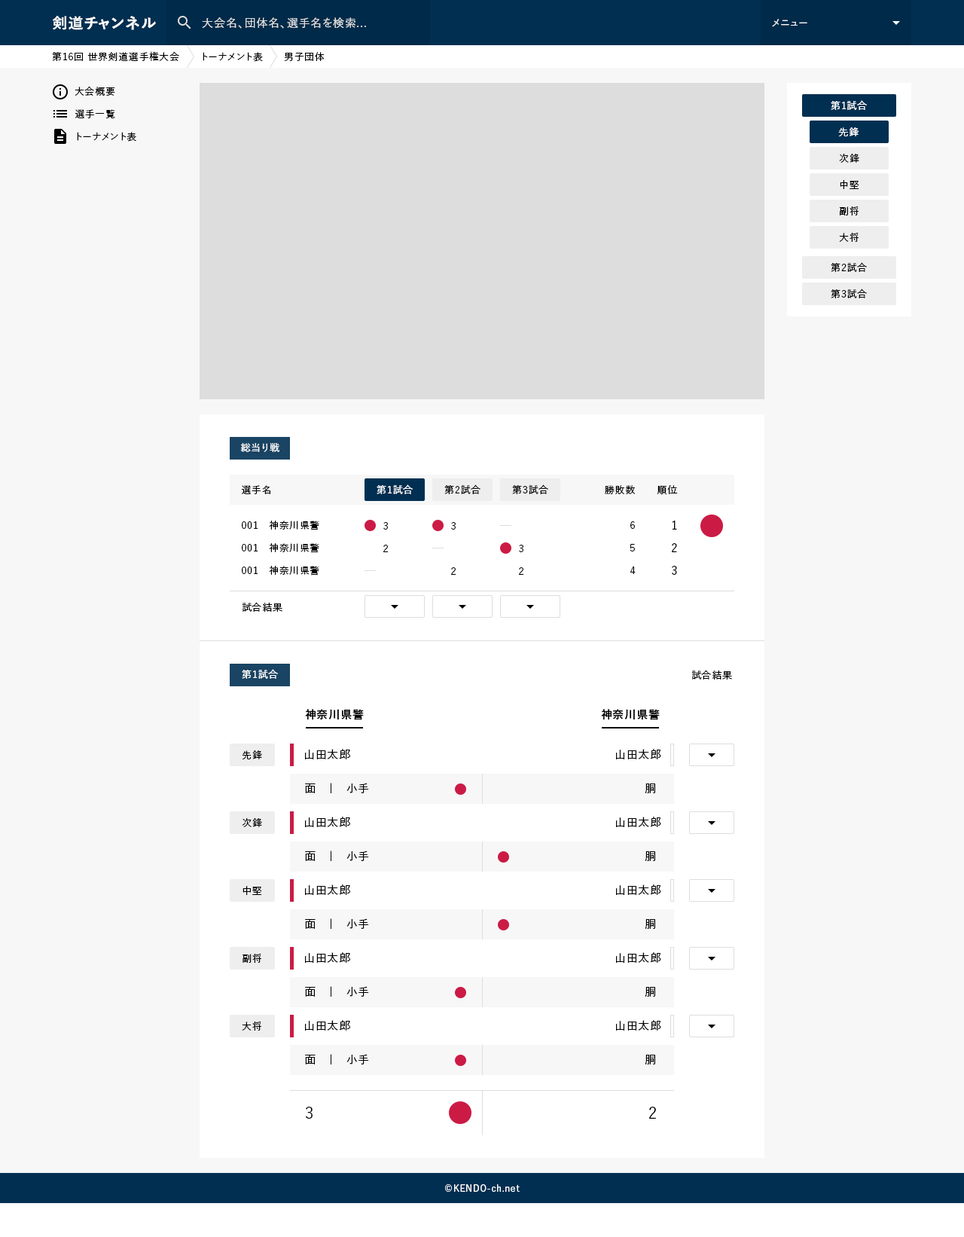
<style>
.page{position:relative;width:964px;height:1237px;background:#f7f7f7}
.page>*{position:absolute;margin:0}
.t1{font:15.1px "YuGo-Bold";letter-spacing:0.05em;color:#ffffff}
.t2{font:11.3px "YuGo-Medium";letter-spacing:0.05em;color:#dddddd}
.t3{font:9.8px "YuGo-Medium";letter-spacing:0.05em;color:#ffffff}
.t4{font:9.8px "YuGo-Medium";letter-spacing:0.05em;color:#000000}
.t5{font:9.8px/22.6px "YuGo-Medium";letter-spacing:0.05em;color:#000000}
.t6{font:9.8px/26.4px "YuGo-Medium";letter-spacing:0.05em;color:#000000}
.t7{font:11.3px "YuGo-Medium";letter-spacing:0.05em;color:#000000}
.t8{font:11.3px "YuGo-Bold";letter-spacing:0.05em;color:#000000}
.t9{font:15.1px "YuGo-Medium";letter-spacing:0.05em;color:#000000}
.t10{font:9px "YuGo-Medium";letter-spacing:0.05em;color:#ffffff}
</style>
<div class="page">
<p class="t1" style="left:53px;top:16px;width:103px;height:14px">剣道チャンネル</p>
<p class="t2" style="left:202px;top:17px;width:164px;height:12px">大会名、団体名、選手名を検索...</p>
<p class="t3" style="left:772px;top:19px;width:35px;height:8px">メニュー</p>
<p class="t4" style="left:52px;top:51px;width:273px;height:11px">第16回 世界剣道選手権大会　　トーナメント表　　男子団体</p>
<p class="t5" style="left:75px;top:86px;width:61px;height:56px">大会概要<br>選手一覧<br>トーナメント表</p>
<p class="t3" style="left:831px;top:100px;width:36px;height:10px">第1試合</p>
<p class="t3" style="left:831px;top:100px;width:36px;height:10px">第1試合</p>
<p class="t3" style="left:838px;top:127px;width:21px;height:9px">先鋒</p>
<p class="t6" style="left:839px;top:127px;width:20px;height:115px;text-align:center">先鋒<br>次鋒<br>中堅<br>副将<br>大将</p>
<p class="t6" style="left:831px;top:262px;width:36px;height:36px;text-align:center">第2試合<br>第3試合</p>
<p class="t3" style="left:241px;top:443px;width:38px;height:9px">総当り戦</p>
<p class="t4" style="left:241px;top:485px;width:29px;height:9px">選手名</p>
<p class="t3" style="left:377px;top:484px;width:36px;height:10px">第1試合</p>
<p class="t3" style="left:377px;top:484px;width:36px;height:10px">第1試合</p>
<p class="t4" style="left:444px;top:484px;width:37px;height:10px">第2試合</p>
<p class="t4" style="left:512px;top:484px;width:36px;height:10px">第3試合</p>
<p class="t4" style="left:605px;top:485px;width:31px;height:9px">勝敗数</p>
<p class="t4" style="left:657px;top:485px;width:21px;height:10px">順位</p>
<p class="t4" style="left:242px;top:520px;width:77px;height:10px">001　神奈川県警</p>
<p class="t4" style="left:383px;top:522px;width:5px;height:8px">3</p>
<p class="t4" style="left:451px;top:522px;width:5px;height:8px">3</p>
<p class="t4" style="left:630px;top:521px;width:5px;height:8px">6</p>
<p class="t7" style="left:672px;top:520px;width:5px;height:10px">1</p>
<p class="t4" style="left:242px;top:543px;width:77px;height:10px">001　神奈川県警</p>
<p class="t4" style="left:383px;top:545px;width:5px;height:7px">2</p>
<p class="t4" style="left:519px;top:545px;width:4px;height:7px">3</p>
<p class="t4" style="left:630px;top:544px;width:5px;height:7px">5</p>
<p class="t7" style="left:672px;top:543px;width:5px;height:9px">2</p>
<p class="t4" style="left:242px;top:566px;width:77px;height:9px">001　神奈川県警</p>
<p class="t4" style="left:451px;top:567px;width:5px;height:8px">2</p>
<p class="t4" style="left:519px;top:567px;width:4px;height:8px">2</p>
<p class="t4" style="left:630px;top:566px;width:6px;height:8px">4</p>
<p class="t7" style="left:672px;top:566px;width:5px;height:9px">3</p>
<p class="t4" style="left:242px;top:602px;width:40px;height:10px">試合結果</p>
<p class="t3" style="left:242px;top:669px;width:36px;height:10px">第1試合</p>
<p class="t4" style="left:691px;top:670px;width:41px;height:9px">試合結果</p>
<p class="t8" style="left:305px;top:709px;width:59px;height:11px">神奈川県警</p>
<p class="t8" style="left:601px;top:709px;width:59px;height:11px">神奈川県警</p>
<p class="t7" style="left:305px;top:749px;width:45px;height:10px">山田太郎</p>
<p class="t7" style="left:616px;top:749px;width:45px;height:10px">山田太郎</p>
<p class="t4" style="left:242px;top:750px;width:20px;height:9px">先鋒</p>
<p class="t7" style="left:305px;top:783px;width:64px;height:10px">面　｜　小手</p>
<p class="t7" style="left:645px;top:783px;width:10px;height:10px">胴</p>
<p class="t4" style="left:242px;top:818px;width:20px;height:9px">次鋒</p>
<p class="t7" style="left:305px;top:816px;width:45px;height:11px">山田太郎</p>
<p class="t7" style="left:616px;top:816px;width:45px;height:11px">山田太郎</p>
<p class="t7" style="left:305px;top:850px;width:64px;height:11px">面　｜　小手</p>
<p class="t7" style="left:645px;top:851px;width:10px;height:10px">胴</p>
<p class="t4" style="left:243px;top:886px;width:19px;height:9px">中堅</p>
<p class="t7" style="left:305px;top:884px;width:45px;height:11px">山田太郎</p>
<p class="t7" style="left:616px;top:884px;width:45px;height:11px">山田太郎</p>
<p class="t7" style="left:305px;top:918px;width:64px;height:11px">面　｜　小手</p>
<p class="t7" style="left:645px;top:919px;width:10px;height:10px">胴</p>
<p class="t4" style="left:243px;top:954px;width:18px;height:9px">副将</p>
<p class="t7" style="left:305px;top:952px;width:45px;height:11px">山田太郎</p>
<p class="t7" style="left:616px;top:952px;width:45px;height:11px">山田太郎</p>
<p class="t7" style="left:305px;top:986px;width:64px;height:11px">面　｜　小手</p>
<p class="t7" style="left:645px;top:987px;width:10px;height:10px">胴</p>
<p class="t4" style="left:242px;top:1021px;width:19px;height:9px">大将</p>
<p class="t7" style="left:305px;top:1020px;width:45px;height:10px">山田太郎</p>
<p class="t7" style="left:616px;top:1020px;width:45px;height:10px">山田太郎</p>
<p class="t7" style="left:305px;top:1054px;width:64px;height:10px">面　｜　小手</p>
<p class="t7" style="left:645px;top:1055px;width:10px;height:9px">胴</p>
<p class="t9" style="left:305px;top:1106px;width:8px;height:13px">３</p>
<p class="t9" style="left:649px;top:1106px;width:7px;height:13px">2</p>
<p class="t10" style="left:445px;top:1184px;width:75px;height:8px">©KENDO-ch.net</p>
</div>
